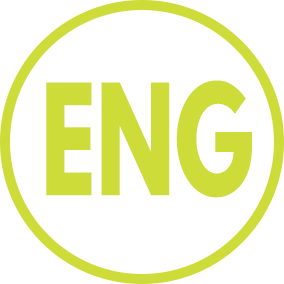
<style>
.page{position:relative;width:284px;height:284px;background:#ffffff}
.page>*{position:absolute;margin:0}
.t1{font:150px "SpartanMB-ExtraBold";color:#cddc39;scale:0.7 1}
</style>
<div class="page">
<p class="t1" style="left:46px;top:80px;width:206px;height:118px">ENG</p>
</div>
